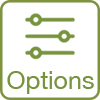
<style>
.page{position:relative;width:100px;height:100px;background:#ffffff}
.page>*{position:absolute;margin:0}
.t1{font:25px "HelveticaNeue";color:#77933c}
</style>
<div class="page">
<p class="t1" style="left:7px;top:71px;width:87px;height:23px">Options</p>
</div>
